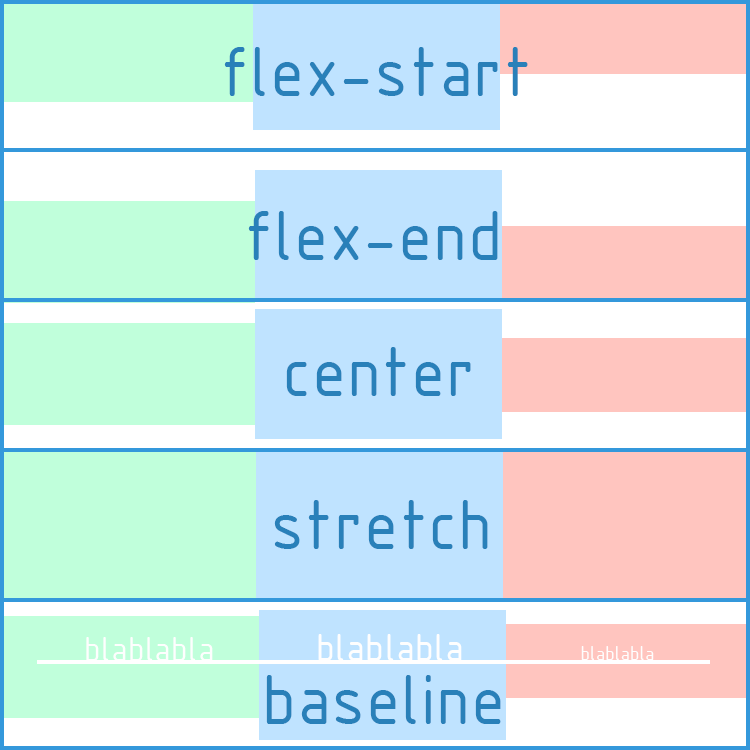
<style>
.page{position:relative;width:750px;height:750px;background:#ffffff}
.page>*{position:absolute;margin:0}
.t1{font:75.9px "ISOCPEUR";letter-spacing:0.006em;color:#2980b9}
.t2{font:37px "ISOCPEUR";letter-spacing:0.006em;color:#fefefe}
.t3{font:42px "ISOCPEUR";letter-spacing:0.006em;color:#fefefe}
.t4{font:21px "ISOCPEUR";letter-spacing:0.006em;color:#fefefe}
</style>
<div class="page">
<p class="t1" style="left:224px;top:47px;width:304px;height:49px">flex-start</p>
<p class="t1" style="left:248px;top:211px;width:250px;height:49px">flex-end</p>
<p class="t1" style="left:286px;top:347px;width:185px;height:49px">center</p>
<p class="t1" style="left:274px;top:500px;width:214px;height:49px">stretch</p>
<p class="t2" style="left:86px;top:637px;width:127px;height:24px">blablabla</p>
<p class="t3" style="left:318px;top:634px;width:144px;height:27px">blablabla</p>
<p class="t4" style="left:581px;top:646px;width:73px;height:14px">blablabla</p>
<p class="t1" style="left:266px;top:675px;width:235px;height:49px">baseline</p>
</div>
